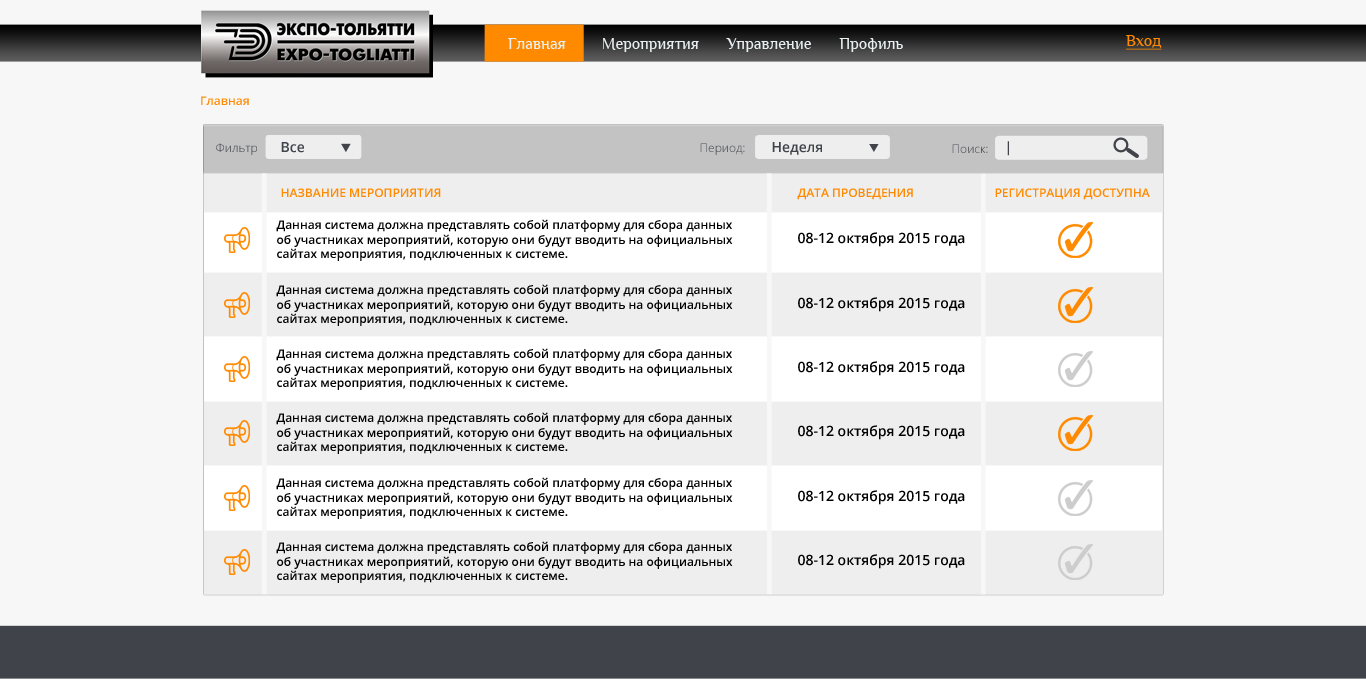
<style>
.page{position:relative;width:1366px;height:679px;background:#f7f7f7}
.page>*{position:absolute;margin:0}
.t1{font:16.5px "Philosopher";color:#e7eff1}
.t2{font:16px "Philosopher";color:#ff8a00;text-decoration:underline}
.t3{font:12px "OpenSans-Semibold";color:#ff8a00}
.t4{font:12px "OpenSans-Light"}
.t5{font:14px "OpenSans-Semibold";color:#40434a}
.t6{font:12px "OpenSans-Light";color:#40434a}
.t7{font:12px "OpenSans-Semibold";color:#ff8a00;text-transform:uppercase}
.t8{font:12px "OpenSans-Semibold";color:#000000}
.t9{font:14px "OpenSans-Semibold";color:#000000}
</style>
<div class="page">
<p class="t1" style="left:508px;top:38px;width:395px;height:14px">Главная         Мероприятия       Управление       Профиль</p>
<p class="t2" style="left:1126px;top:35px;width:36px;height:15px">Вход</p>
<p class="t3" style="left:201px;top:96px;width:48px;height:9px">Главная</p>
<p class="t4" style="left:216px;top:143px;width:41px;height:12px">Фильтр</p>
<p class="t5" style="left:281px;top:142px;width:23px;height:11px">Все</p>
<p class="t4" style="left:700px;top:143px;width:45px;height:12px">Период:</p>
<p class="t5" style="left:772px;top:142px;width:50px;height:13px">Неделя</p>
<p class="t6" style="left:952px;top:144px;width:36px;height:9px">Поиск:</p>
<p class="t5" style="left:1007px;top:141px;width:2px;height:15px">|</p>
<p class="t7" style="left:281px;top:188px;width:160px;height:9px">Название мероприятия</p>
<p class="t7" style="left:797px;top:188px;width:116px;height:12px">Дата проведения</p>
<p class="t7" style="left:995px;top:188px;width:155px;height:12px">Регистрация доступна</p>
<p class="t8" style="left:276px;top:219px;width:457px;height:42px">Данная система должна представлять собой платформу для сбора данных<br>об участниках мероприятий, которую они будут вводить на официальных<br>сайтах мероприятия, подключенных к системе.</p>
<p class="t9" style="left:798px;top:232px;width:167px;height:15px">08-12 октября 2015 года</p>
<p class="t8" style="left:276px;top:284px;width:457px;height:42px">Данная система должна представлять собой платформу для сбора данных<br>об участниках мероприятий, которую они будут вводить на официальных<br>сайтах мероприятия, подключенных к системе.</p>
<p class="t9" style="left:798px;top:297px;width:167px;height:15px">08-12 октября 2015 года</p>
<p class="t8" style="left:276px;top:348px;width:457px;height:42px">Данная система должна представлять собой платформу для сбора данных<br>об участниках мероприятий, которую они будут вводить на официальных<br>сайтах мероприятия, подключенных к системе.</p>
<p class="t9" style="left:798px;top:361px;width:167px;height:15px">08-12 октября 2015 года</p>
<p class="t8" style="left:276px;top:412px;width:457px;height:42px">Данная система должна представлять собой платформу для сбора данных<br>об участниках мероприятий, которую они будут вводить на официальных<br>сайтах мероприятия, подключенных к системе.</p>
<p class="t9" style="left:798px;top:425px;width:167px;height:15px">08-12 октября 2015 года</p>
<p class="t8" style="left:276px;top:477px;width:457px;height:42px">Данная система должна представлять собой платформу для сбора данных<br>об участниках мероприятий, которую они будут вводить на официальных<br>сайтах мероприятия, подключенных к системе.</p>
<p class="t9" style="left:798px;top:490px;width:167px;height:15px">08-12 октября 2015 года</p>
<p class="t8" style="left:276px;top:541px;width:457px;height:42px">Данная система должна представлять собой платформу для сбора данных<br>об участниках мероприятий, которую они будут вводить на официальных<br>сайтах мероприятия, подключенных к системе.</p>
<p class="t9" style="left:798px;top:554px;width:167px;height:15px">08-12 октября 2015 года</p>
</div>
